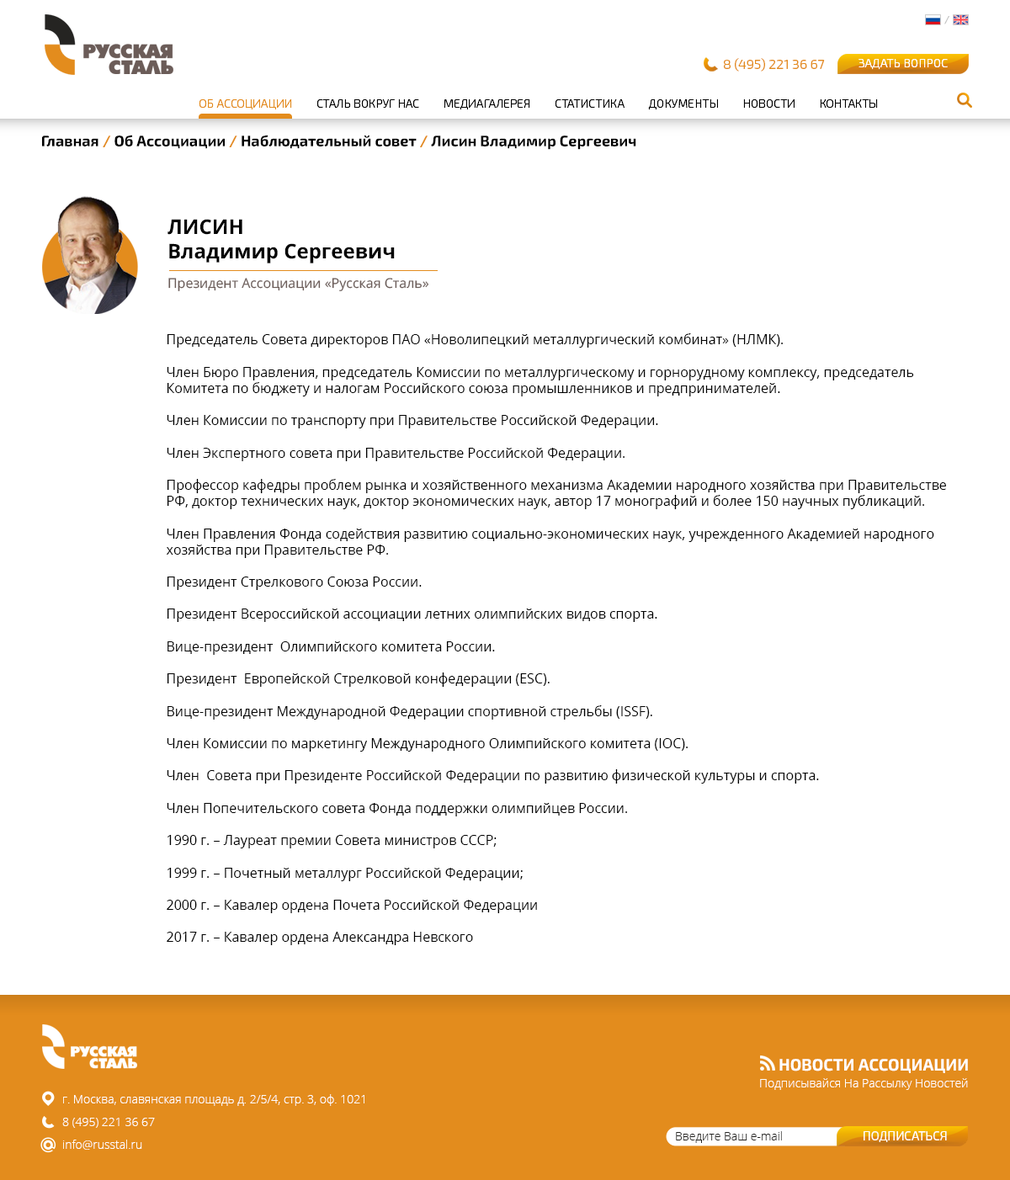
<style>
.page{position:relative;width:1010px;height:1180px;background:#ffffff}
.page>*{position:absolute;margin:0}
.t1{font:10.1px "Exo2.0-Medium";color:#c3c3c3}
.t2{font:13.5px "Exo2.0-Light";color:#e38c1d}
.t3{font:11.9px "Exo2.0-Light";color:#ffffff}
.t4{font:11.8px "Exo2.0-Light";color:#000000}
.t5{font:11.8px "Exo2.0-Light";color:#e38c1d}
.t6{font:15.2px "Exo2.0-Bold";color:#000000}
.t7{font:15.2px "Exo2.0-Bold";color:#e38c1d}
.t8{font:20.2px "OpenSans-Bold";color:#000000}
.t9{font:13.5px "OpenSans";color:#6b5c58}
.t10{font:13.5px "OpenSans";color:#000000}
.t11{font:16.6px "Exo2.0-Bold";color:#ffffff}
.t12{font:11.8px "OpenSans-Light";color:#ffffff}
.t13{font:11.8px/22.7px "OpenSans-Light";color:#ffffff}
.t14{font:11.8px "OpenSans-Light";color:#252422}
.t15{font:12.4px "Exo2.0-Light";color:#ffffff}
</style>
<div class="page">
<p class="t1" style="left:945px;top:16px;width:5px;height:8px">/</p>
<p class="t2" style="left:724px;top:58px;width:101px;height:14px">8 (495) 221 36 67</p>
<p class="t3" style="left:859px;top:59px;width:89px;height:11px">ЗАДАТЬ ВОПРОС</p>
<p class="t4" style="left:199px;top:99px;width:679px;height:11px"><span class="t5">ОБ АССОЦИАЦИИ</span>         СТАЛЬ ВОКРУГ НАС         МЕДИАГАЛЕРЕЯ         СТАТИСТИКА         ДОКУМЕНТЫ         НОВОСТИ         КОНТАКТЫ</p>
<p class="t6" style="left:42px;top:135px;width:594px;height:15px">Главная <span class="t7">/</span> Об Ассоциации <span class="t7">/</span> Наблюдательный совет <span class="t7">/</span> Лисин Владимир Сергеевич</p>
<p class="t8" style="left:168px;top:219px;width:227px;height:45px">ЛИСИН<br>Владимир Сергеевич</p>
<p class="t9" style="left:168px;top:278px;width:261px;height:13px">Президент Ассоциации «Русская Сталь»</p>
<p class="t10" style="left:166px;top:333px;width:780px;height:612px">Председатель Совета директоров ПАО «Новолипецкий металлургический комбинат» (НЛМК).<br><br>Член Бюро Правления, председатель Комиссии по металлургическому и горнорудному комплексу, председатель Комитета по бюджету и налогам Российского союза промышленников и предпринимателей.<br><br>Член Комиссии по транспорту при Правительстве Российской Федерации.<br><br>Член Экспертного совета при Правительстве Российской Федерации.<br><br>Профессор кафедры проблем рынка и хозяйственного механизма Академии народного хозяйства при Правительстве РФ, доктор технических наук, доктор экономических наук, автор 17 монографий и более 150 научных публикаций.<br><br>Член Правления Фонда содействия развитию социально-экономических наук, учрежденного Академией народного хозяйства при Правительстве РФ. <br><br>Президент Стрелкового Союза России. <br><br>Президент Всероссийской ассоциации летних олимпийских видов спорта. <br><br>Вице-президент  Олимпийского комитета России. <br><br>Президент  Европейской Стрелковой конфедерации (ESC). <br><br>Вице-президент Международной Федерации спортивной стрельбы (ISSF). <br><br>Член Комиссии по маркетингу Международного Олимпийского комитета (IOC). <br><br>Член  Совета при Президенте Российской Федерации по развитию физической культуры и спорта. <br><br>Член Попечительского совета Фонда поддержки олимпийцев России. <br><br>1990 г. – Лауреат премии Совета министров ССCР;<br><br>1999 г. – Почетный металлург Российской Федерации;<br><br>2000 г. – Кавалер ордена Почета Российской Федерации<br><br>2017 г. – Кавалер ордена Александра Невского</p>
<p class="t11" style="left:780px;top:1059px;width:188px;height:14px">НОВОСТИ АССОЦИАЦИИ</p>
<p class="t12" style="left:760px;top:1078px;width:208px;height:12px">Подписывайся На Рассылку Новостей</p>
<p class="t13" style="left:62px;top:1094px;width:303px;height:56px">г. Москва, славянская площадь д. 2/5/4, стр. 3, оф. 1021<br>8 (495) 221 36 67<br>info@russtal.ru</p>
<p class="t14" style="left:676px;top:1131px;width:106px;height:12px">Введите Ваш e-mail</p>
<p class="t15" style="left:864px;top:1131px;width:83px;height:11px">ПОДПИСАТЬСЯ</p>
</div>
